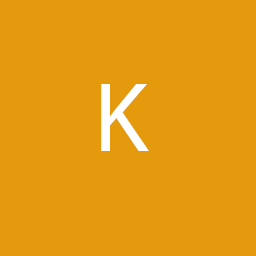
<style>
.page{position:relative;width:256px;height:256px;background:#e49a0c}
.page>*{position:absolute;margin:0}
.t1{font:100px "MyriadPro-Regular";color:#ffffff}
</style>
<div class="page">
<p class="t1" style="left:101px;top:84px;width:48px;height:67px">K</p>
</div>
